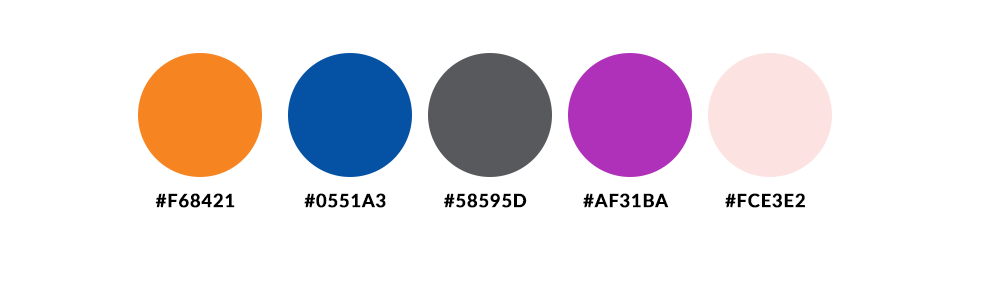
<style>
.page{position:relative;width:1000px;height:300px;background:#ffffff}
.page>*{position:absolute;margin:0}
.t1{font:18.2px "Lato-Bold";letter-spacing:0.025em;color:#000000;text-transform:uppercase;font-weight:bold}
</style>
<div class="page">
<p class="t1" style="left:155px;top:193px;width:80px;height:15px">#f68421</p>
<p class="t1" style="left:304px;top:193px;width:82px;height:15px">#0551a3</p>
<p class="t1" style="left:444px;top:193px;width:83px;height:15px">#58595d</p>
<p class="t1" style="left:583px;top:193px;width:86px;height:15px">#af31ba</p>
<p class="t1" style="left:725px;top:193px;width:80px;height:15px">#fce3e2</p>
</div>
